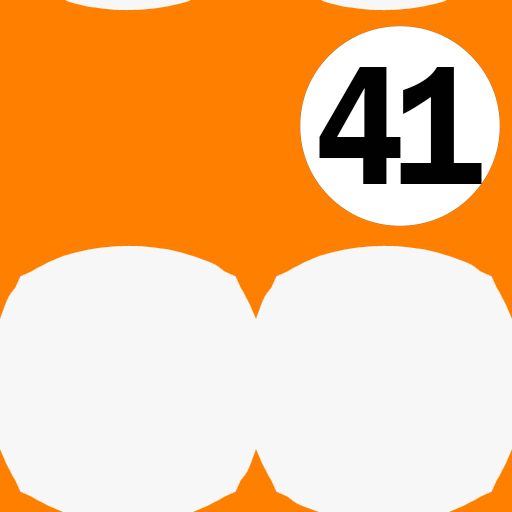
<style>
.page{position:relative;width:512px;height:512px;background:#f7f7f7}
.page>*{position:absolute;margin:0}
.t1{font:172.5px "FranklinGothic-Demi";letter-spacing:-0.05em;color:#010101;scale:0.87 1}
</style>
<div class="page">
<p class="t1" style="left:319px;top:67px;width:163px;height:117px">41</p>
</div>
